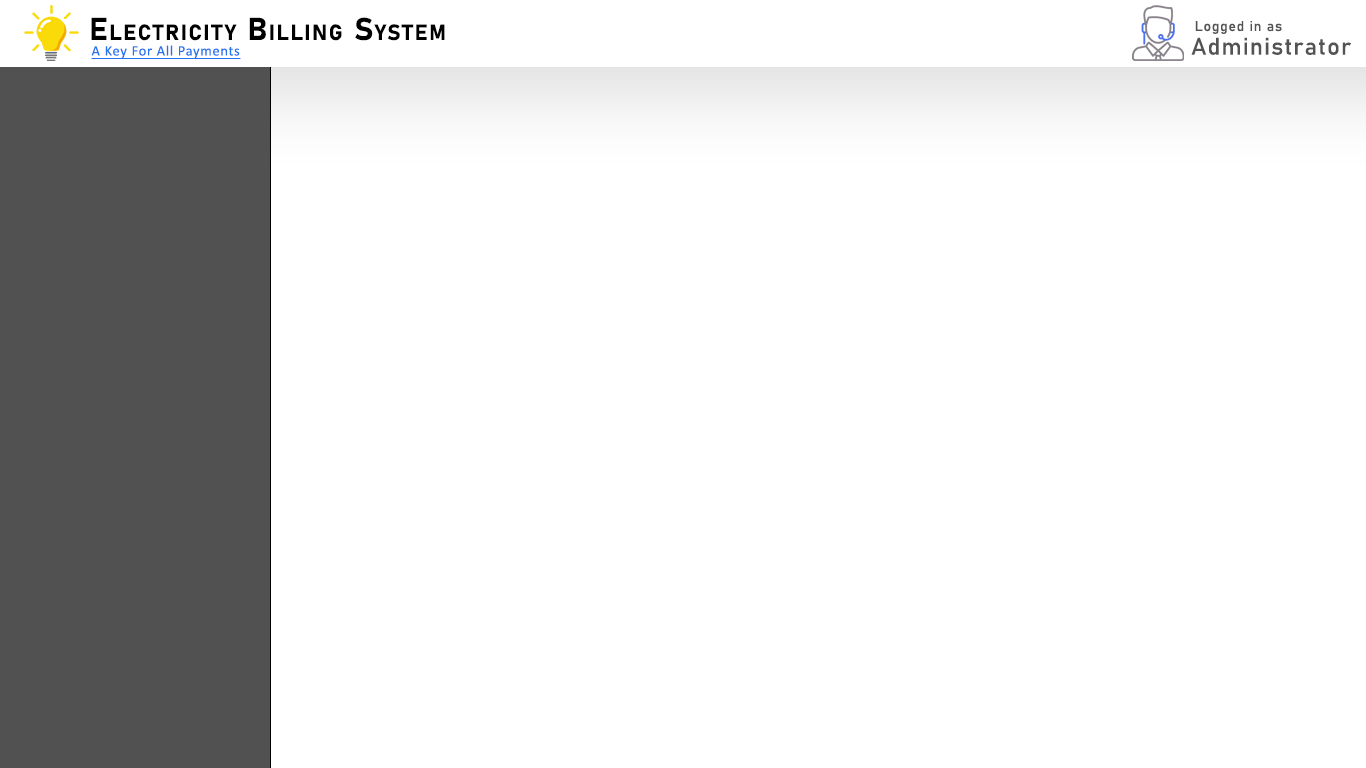
<style>
.page{position:relative;width:1366px;height:768px;background:#ffffff}
.page>*{position:absolute;margin:0}
.t1{font:31px "Bahnschrift-Bold";letter-spacing:0.05em;color:#000000;font-variant:small-caps}
.t2{font:14.1px "Bahnschrift";letter-spacing:0.05em;color:#535353}
.t3{font:23.5px "Bahnschrift";letter-spacing:0.05em;color:#535353}
.t4{font:14.4px "Calibri";letter-spacing:0.05em;color:#2473ef;text-decoration:underline}
</style>
<div class="page">
<p class="t1" style="left:91px;top:17px;width:354px;height:24px">Electricity Billing System</p>
<p class="t2" style="left:1195px;top:21px;width:87px;height:13px">Logged in as</p>
<p class="t3" style="left:1191px;top:37px;width:160px;height:18px">Administrator</p>
<p class="t4" style="left:91px;top:45px;width:150px;height:14px">A Key For All Payments</p>
</div>
